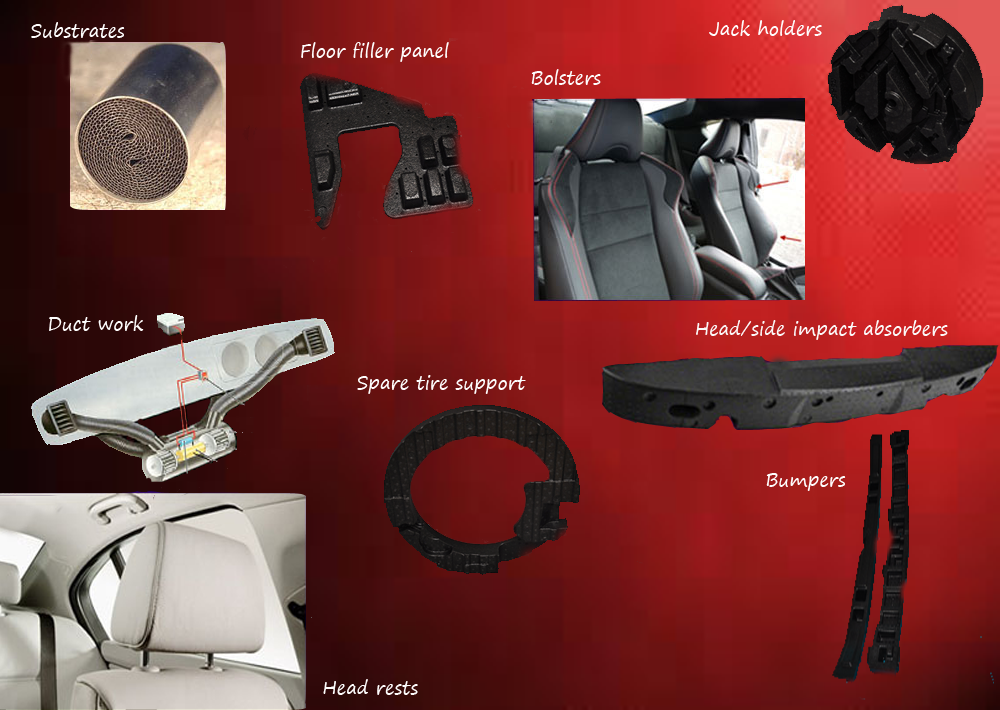
<style>
.page{position:relative;width:1000px;height:710px}
.page>*{position:absolute;margin:0}
.t1{font:18px "SegoePrint";color:#fdfdfd}
.t2{font:18px "SegoePrint";color:#fefdfd}
.t3{font:18px "SegoePrint";color:#fdfcfc}
.t4{font:18px "SegoePrint";color:#fbf9f9}
</style>
<div class="page">
<p class="t1" style="left:31px;top:22px;width:94px;height:16px">Substrates</p>
<p class="t2" style="left:709px;top:20px;width:113px;height:16px">Jack holders</p>
<p class="t2" style="left:301px;top:42px;width:148px;height:20px">Floor filler panel</p>
<p class="t3" style="left:531px;top:69px;width:70px;height:16px">Bolsters</p>
<p class="t2" style="left:49px;top:315px;width:95px;height:16px">Duct work</p>
<p class="t4" style="left:696px;top:320px;width:252px;height:20px">Head/side impact absorbers</p>
<p class="t2" style="left:357px;top:375px;width:169px;height:19px">Spare tire support</p>
<p class="t2" style="left:766px;top:473px;width:80px;height:18px">Bumpers</p>
<p class="t3" style="left:323px;top:679px;width:95px;height:16px">Head rests</p>
</div>
